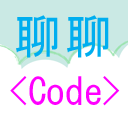
<style>
.page{position:relative;width:128px;height:128px;background:#ffffff}
.page>*{position:absolute;margin:0}
.t1{font:47.1px "MS-Gothic";color:#00aeef}
.t2{font:37.4px "MS-Gothic";color:#ff00ff}
</style>
<div class="page">
<p class="t1" style="left:16px;top:15px;width:42px;height:43px">聊</p>
<p class="t1" style="left:67px;top:15px;width:42px;height:43px">聊</p>
<p class="t2" style="left:10px;top:76px;width:110px;height:30px">&lt;Code&gt;</p>
</div>
